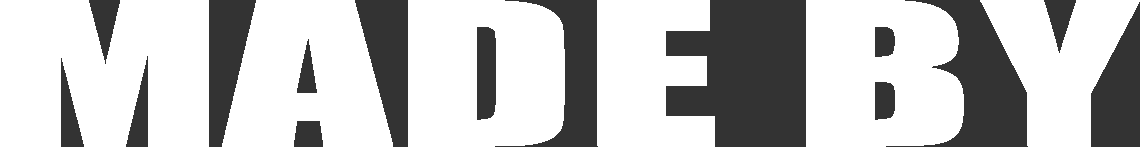
<style>
.page{position:relative;width:1140px;height:147px;background:#ffffff}
.page>*{position:absolute;margin:0}
.t1{font:184.4px "Impact";color:#ffffff;font-weight:bold;scale:1.77 1}
</style>
<div class="page">
<p class="t1" style="left:0px;top:0px;width:1140px;height:147px">MADE BY</p>
</div>
